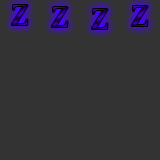
<style>
.page{position:relative;width:160px;height:160px;background:#333333}
.page>*{position:absolute;margin:0}
.t1{font:30px "BodoniMT"}
</style>
<div class="page">
<p class="t1" style="left:12px;top:5px;width:16px;height:20px">Z</p>
<p class="t1" style="left:132px;top:6px;width:16px;height:20px">Z</p>
<p class="t1" style="left:52px;top:7px;width:16px;height:20px">Z</p>
<p class="t1" style="left:92px;top:9px;width:16px;height:20px">Z</p>
</div>
